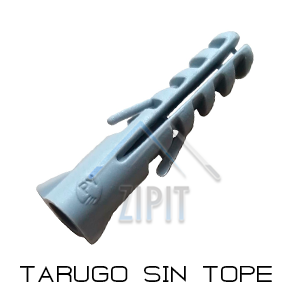
<style>
.page{position:relative;width:300px;height:300px;background:#ffffff}
.page>*{position:absolute;margin:0}
.t1{font:20px "GearusBold";color:#000000}
</style>
<div class="page">
<p class="t1" style="left:20px;top:266px;width:252px;height:16px">TARUGO SIN TOPE</p>
</div>
